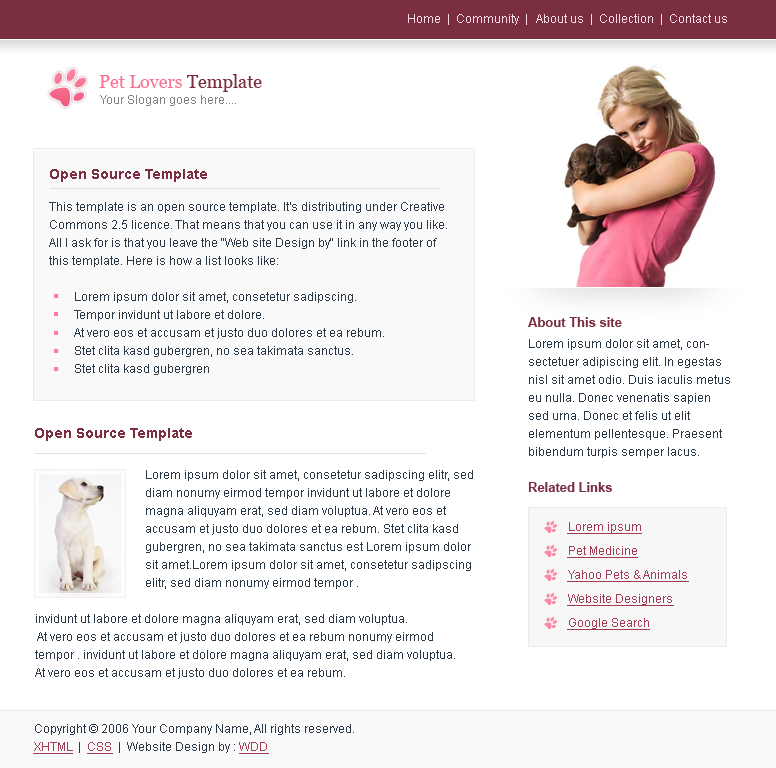
<style>
.page{position:relative;width:776px;height:768px;background:#ffffff}
.page>*{position:absolute;margin:0}
.t1{font:12px "ArialMT";color:#f6dde3}
.t2{font:18px "Georgia";color:#fa7393}
.t3{font:18px "Georgia";color:#7a2e40}
.t4{font:12px "ArialMT";color:#818282}
.t5{font:14px "Arial-BoldMT";color:#7a2e40}
.t6{font:12px/18px "ArialMT";color:#2a3845}
.t7{font:13px "Arial-BoldMT";color:#7a2e40}
.t8{font:12px/24px "ArialMT";color:#a43b55;text-decoration:underline}
.t9{font:12px/18px "ArialMT";color:#a43b55;text-decoration:underline}
</style>
<div class="page">
<p class="t1" style="left:408px;top:14px;width:319px;height:11px">Home  |  Community  |   About us  |  Collection  |  Contact us</p>
<p class="t2" style="left:99px;top:74px;width:163px;height:18px">Pet Lovers<span class="t3"> Template</span></p>
<p class="t4" style="left:100px;top:95px;width:136px;height:11px">Your Slogan goes here....</p>
<p class="t5" style="left:50px;top:169px;width:157px;height:13px">Open Source Template</p>
<p class="t6" style="left:49px;top:202px;width:398px;height:173px">This template is an open source template. It's distributing under Creative Commons 2.5 licence. That means that you can use it in any way you like. All I ask for is that you leave the "Web site Design by" link in the footer of this template. Here is how a list looks like:<br><br>Lorem ipsum dolor sit amet, consetetur sadipscing.<br>Tempor invidunt ut labore et dolore.<br>At vero eos et accusam et justo duo dolores et ea rebum.<br>Stet clita kasd gubergren, no sea takimata sanctus.<br>Stet clita kasd gubergren</p>
<p class="t7" style="left:528px;top:317px;width:94px;height:10px">About This site</p>
<p class="t6" style="left:529px;top:339px;width:201px;height:119px">Lorem ipsum dolor sit amet, consectetuer adipiscing elit. In egestas nisl sit amet odio. Duis iaculis metus eu nulla. Donec venenatis sapien sed urna. Donec et felis ut elit elementum pellentesque. Praesent bibendum turpis semper lacus.</p>
<p class="t5" style="left:35px;top:428px;width:157px;height:13px">Open Source Template</p>
<p class="t6" style="left:35px;top:470px;width:438px;height:209px">Lorem ipsum dolor sit amet, consetetur sadipscing elitr, sed diam nonumy eirmod tempor invidunt ut labore et dolore magna aliquyam erat, sed diam voluptua. At vero eos et accusam et justo duo dolores et ea rebum. Stet clita kasd gubergren, no sea takimata sanctus est Lorem ipsum dolor sit amet.Lorem ipsum dolor sit amet, consetetur sadipscing elitr, sed diam nonumy eirmod tempor .<br><br>invidunt ut labore et dolore magna aliquyam erat, sed diam voluptua.<br> At vero eos et accusam et justo duo dolores et ea rebum nonumy eirmod tempor . invidunt ut labore et dolore magna aliquyam erat, sed diam voluptua. <br>At vero eos et accusam et justo duo dolores et ea rebum.</p>
<p class="t7" style="left:528px;top:482px;width:84px;height:10px">Related Links</p>
<p class="t8" style="left:567px;top:522px;width:122px;height:108px">Lorem ipsum<br>Pet Medicine<br>Yahoo Pets &amp; Animals<br>Website Designers<br>Google Search</p>
<p class="t6" style="left:33px;top:724px;width:321px;height:30px">Copyright © 2006 Your Company Name, All rights reserved.<br><span class="t9">XHTML</span>  |  <span class="t9">CSS</span>  |  Website Design by : <span class="t9">WDD</span></p>
</div>
